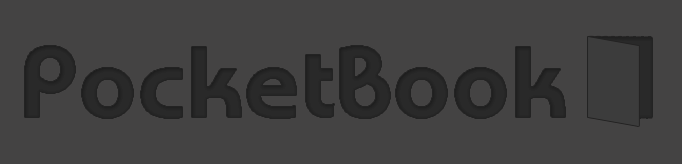
<style>
.page{position:relative;width:682px;height:164px;background:#444343}
.page>*{position:absolute;margin:0}
.t1{font:100px "WorldofWater-Regular";color:#2f2f2f}
</style>
<div class="page">
<p class="t1" style="left:25px;top:46px;width:540px;height:72px">PocketBook</p>
</div>
